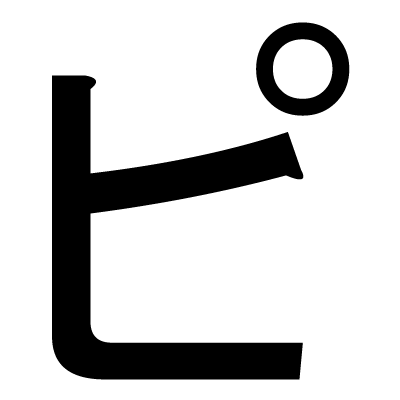
<style>
.page{position:relative;width:400px;height:400px;background:#ffffff}
.page>*{position:absolute;margin:0}
.t1{font:424.8px "MS-PGothic";color:#000000}
</style>
<div class="page">
<p class="t1" style="left:52px;top:22px;width:298px;height:358px">ピ</p>
</div>
